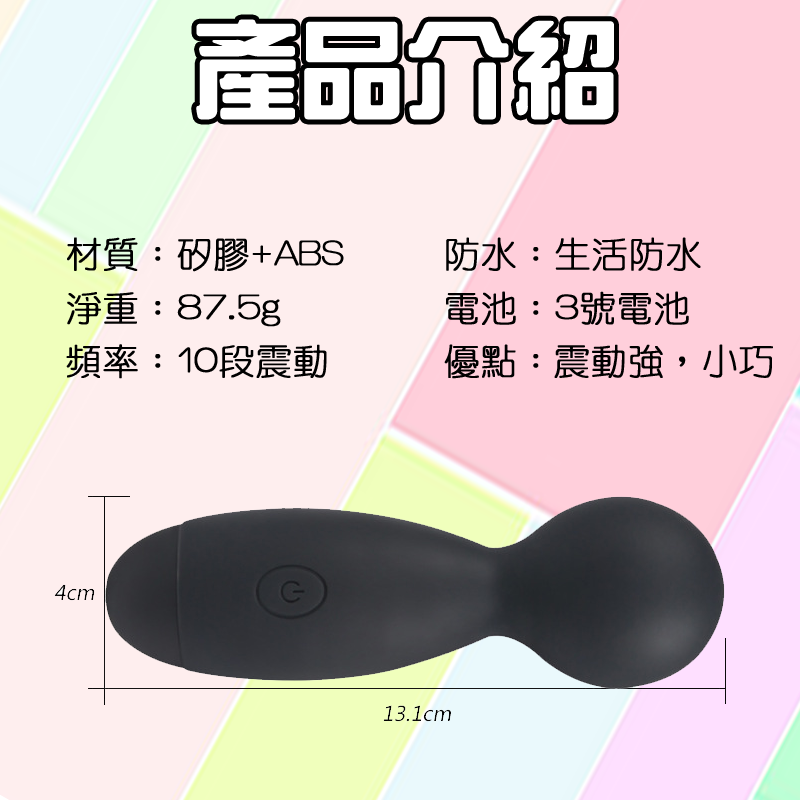
<style>
.page{position:relative;width:800px;height:800px;background:#feeeee}
.page>*{position:absolute;margin:0}
.t1{font:103.8px "HanWangZonYi";color:#ffffff;font-weight:bold}
.t2{font:36px "HanWangYenLight";color:#000000;font-weight:bold}
</style>
<div class="page">
<p class="t1" style="left:196px;top:19px;width:418px;height:101px">產品介紹</p>
<p class="t2" style="left:66px;top:237px;width:707px;height:142px">材質：矽膠+ABS              防水：生活防水<br>淨重：87.5g                            電池：3號電池<br>頻率：10段震動      優點：震動強，小巧</p>
</div>
